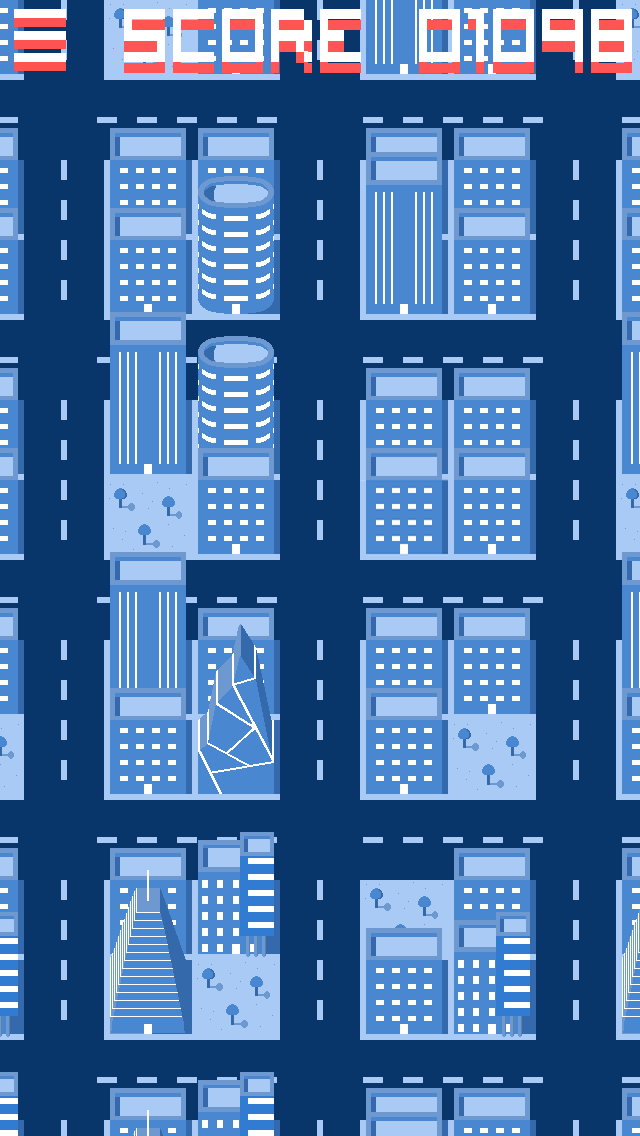
<style>
.page{position:relative;width:640px;height:1136px;background:#08366b}
.page>*{position:absolute;margin:0}
.t1{font:136px "VisitorTT2BRK";color:#ffffff;scale:0.78 1}
.t2{font:136px "VisitorTT2BRK";scale:0.78 1}
</style>
<div class="page">
<p class="t1" style="left:124px;top:9px;width:508px;height:53px">SCORE 01098</p>
<p class="t2" style="left:124px;top:20px;width:508px;height:53px">SCORE 01098</p>
</div>
